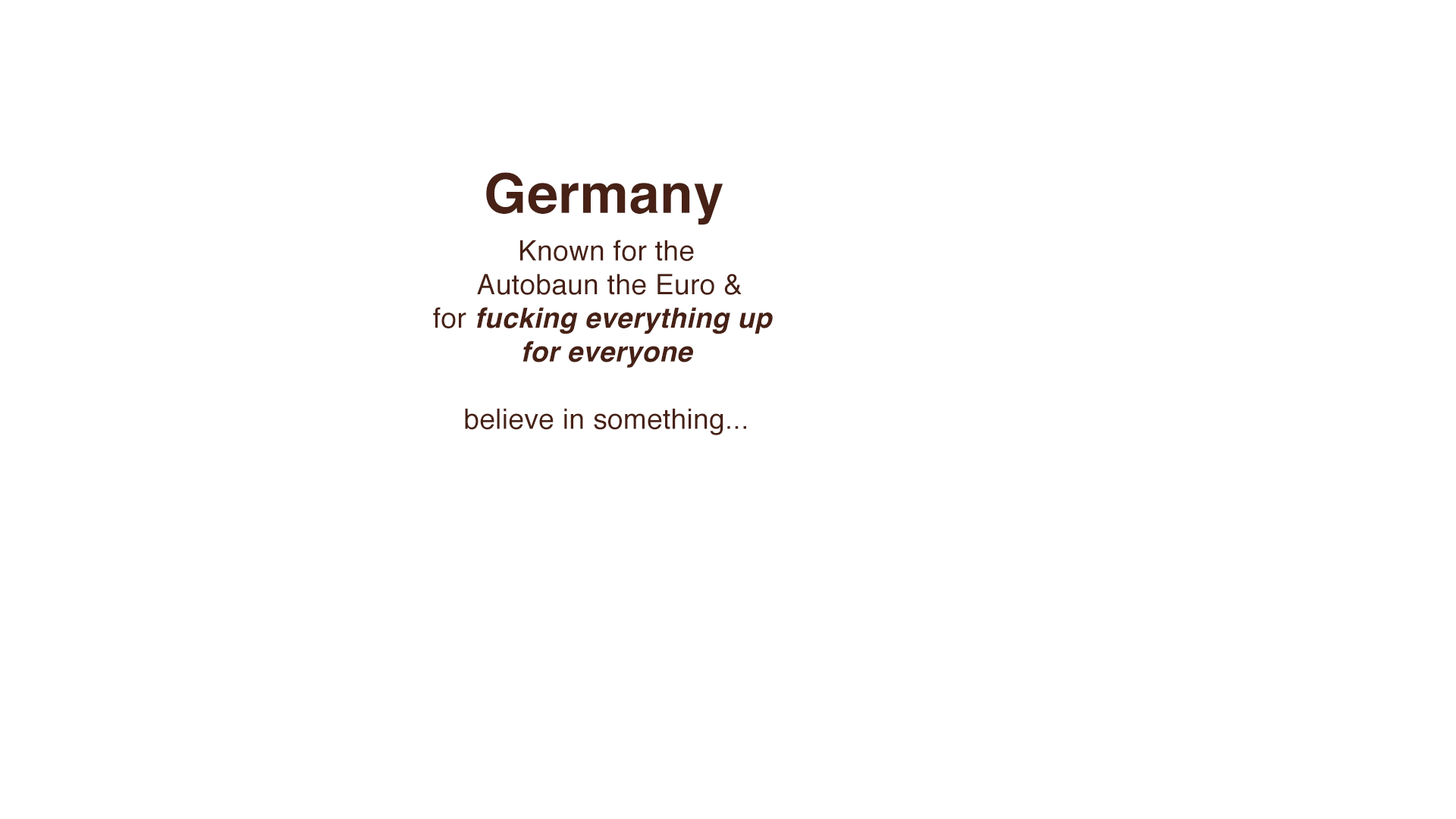
<style>
.page{position:relative;width:1456px;height:819px;background:#ffffff}
.page>*{position:absolute;margin:0}
.t1{font:54.6px "Helvetica-Bold";letter-spacing:0.01em;color:#472115}
.t2{font:28.1px "Helvetica";letter-spacing:0.01em;color:#472115}
.t3{font:28.1px "Helvetica-BoldOblique";letter-spacing:0.01em;color:#472115}
</style>
<div class="page">
<p class="t1" style="left:486px;top:172px;width:237px;height:53px">Germany</p>
<p class="t2" style="left:433px;top:240px;width:340px;height:195px;text-align:center">Known for the<br> Autobaun the Euro &amp;<br>for <span class="t3">fucking everything up <br>for everyone<br></span> <br>believe in something...</p>
</div>
